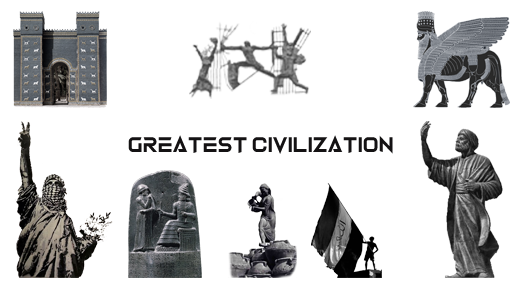
<style>
.page{position:relative;width:523px;height:308px;background:#ffffff}
.page>*{position:absolute;margin:0}
.t1{font:20px "Skygraze";color:#050304}
</style>
<div class="page">
<p class="t1" style="left:128px;top:135px;width:265px;height:19px;opacity:0.94">Greatest Civilization</p>
</div>
